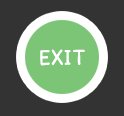
<style>
.page{position:relative;width:124px;height:116px;background:#333333}
.page>*{position:absolute;margin:0}
.t1{font:29.1px "LayijiMaHaNiYomV1.5";letter-spacing:0.01em;color:#ffffff;font-weight:bold}
</style>
<div class="page">
<p class="t1" style="left:40px;top:49px;width:45px;height:17px">EXIT</p>
</div>
